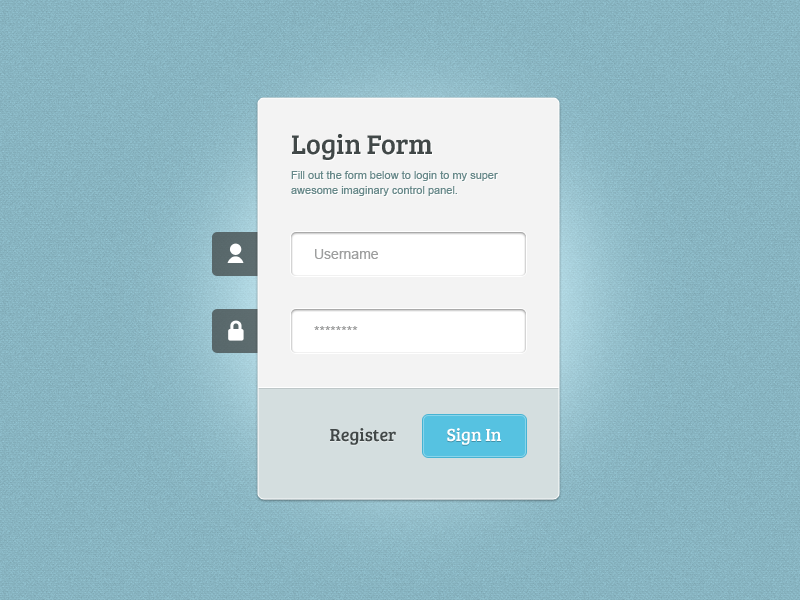
<style>
.page{position:relative;width:800px;height:600px}
.page>*{position:absolute;margin:0}
.t1{font:11px/15px "ArialMT";color:#678889}
.t2{font:28px/13.4px "BreeSerif-Regular";color:#414848}
.t3{font:14px "ArialMT";color:#9d9e9e}
.t4{font:18px "BreeSerif-Regular";color:#414848}
.t5{font:18px "BreeSerif-Regular";color:#ffffff}
</style>
<div class="page">
<p class="t1" style="left:291px;top:134px;width:207px;height:62px"><span class="t2">Login Form<br></span>Fill out the form below to login to my super awesome imaginary control panel.</p>
<p class="t3" style="left:315px;top:249px;width:63px;height:10px">Username</p>
<p class="t3" style="left:314px;top:326px;width:44px;height:4px">********</p>
<p class="t4" style="left:330px;top:428px;width:66px;height:17px">Register</p>
<p class="t5" style="left:447px;top:428px;width:54px;height:17px">Sign In</p>
</div>
